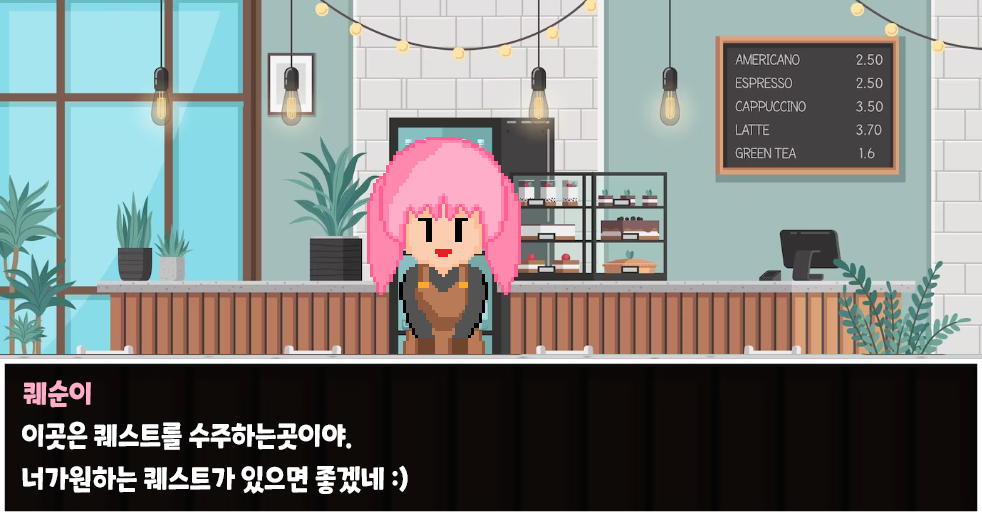
<style>
.page{position:relative;width:982px;height:516px}
.page>*{position:absolute;margin:0}
.t1{font:29.3px "ONEMobilePOPRegular";color:#ffaec9;scale:0.91 1}
.t2{font:29.3px "ONEMobilePOPRegular";color:#ffffff;scale:0.91 1}
</style>
<div class="page">
<p class="t1" style="left:23px;top:380px;width:68px;height:28px">퀘순이</p>
<p class="t2" style="left:22px;top:421px;width:330px;height:29px">이곳은 퀘스트를 수주하는곳이야.</p>
<p class="t2" style="left:22px;top:465px;width:386px;height:29px">너가원하는 퀘스트가 있으면 좋겠네 :)</p>
</div>
